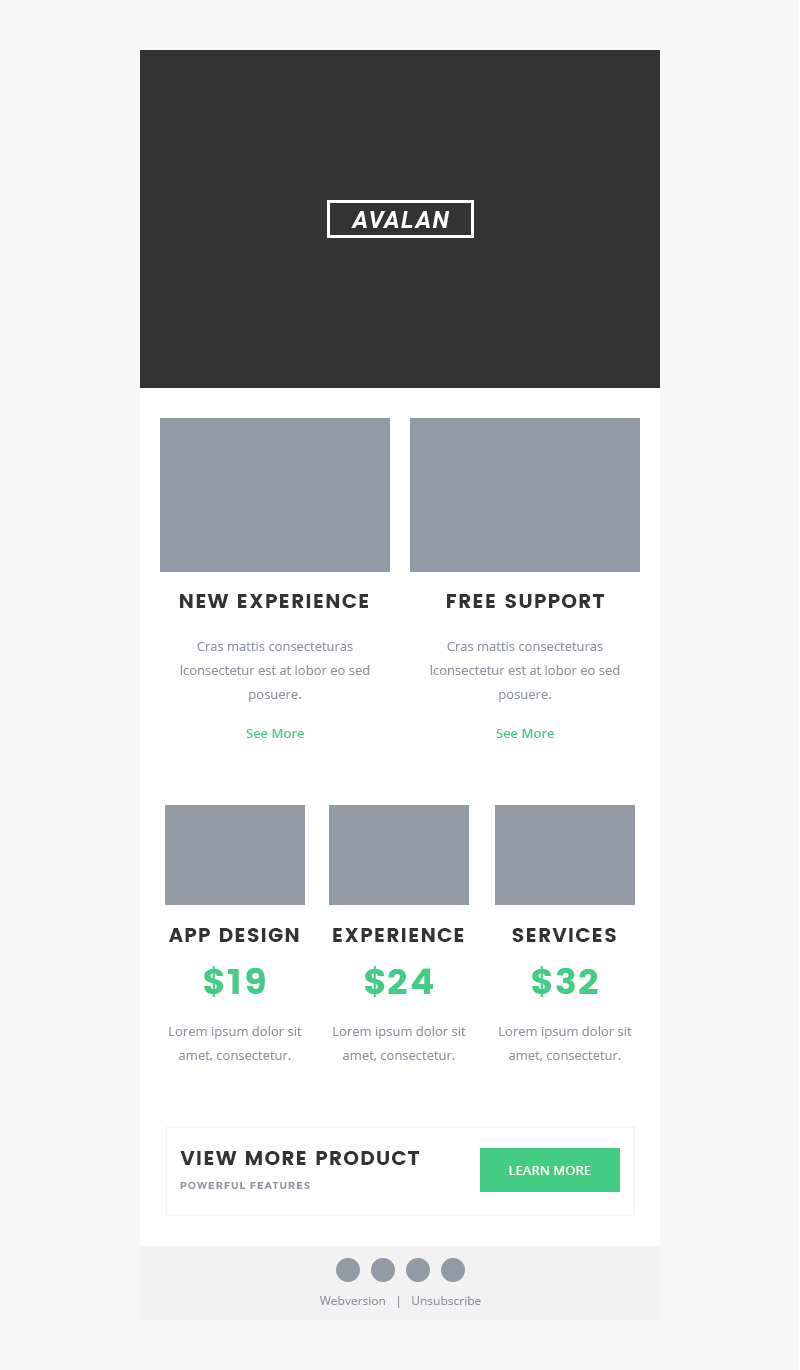
<style>
.page{position:relative;width:800px;height:1370px;background:#f7f7f7}
.page>*{position:absolute;margin:0}
.t1{font:20px "Poppins";letter-spacing:0.05em;color:#333333}
.t2{font:13px/24px "OpenSans";color:#8f96a1}
.t3{font:13px "OpenSans-Semibold";color:#44cc84}
.t4{font:36px "Poppins";letter-spacing:0.05em;color:#44cc84}
.t5{font:13px "OpenSans-Semibold";color:#ffffff}
.t6{font:10px "Montserrat-Bold";letter-spacing:0.1em;color:#8f96a1}
.t7{font:12px "OpenSans";color:#8f96a1}
</style>
<div class="page">
<p class="t1" style="left:180px;top:594px;width:188px;height:14px">NEW EXPERIENCE</p>
<p class="t1" style="left:447px;top:594px;width:158px;height:14px">FREE SUPPORT</p>
<p class="t2" style="left:180px;top:642px;width:190px;height:60px;text-align:center">Cras mattis consecteturas lconsectetur est at lobor eo sed posuere.</p>
<p class="t2" style="left:430px;top:642px;width:190px;height:60px;text-align:center">Cras mattis consecteturas lconsectetur est at lobor eo sed posuere.</p>
<p class="t3" style="left:246px;top:729px;width:58px;height:9px">See More</p>
<p class="t3" style="left:496px;top:729px;width:58px;height:9px">See More</p>
<p class="t1" style="left:168px;top:928px;width:131px;height:14px">APP DESIGN</p>
<p class="t1" style="left:333px;top:928px;width:131px;height:14px">EXPERIENCE</p>
<p class="t1" style="left:512px;top:928px;width:104px;height:14px">SERVICES</p>
<p class="t4" style="left:204px;top:966px;width:61px;height:31px">$19</p>
<p class="t4" style="left:365px;top:966px;width:68px;height:31px">$24</p>
<p class="t4" style="left:532px;top:966px;width:66px;height:31px">$32</p>
<p class="t2" style="left:169px;top:1026px;width:133px;height:35px;text-align:center">Lorem ipsum dolor sit amet, consectetur.</p>
<p class="t2" style="left:333px;top:1026px;width:133px;height:35px;text-align:center">Lorem ipsum dolor sit amet, consectetur.</p>
<p class="t2" style="left:499px;top:1026px;width:133px;height:35px;text-align:center">Lorem ipsum dolor sit amet, consectetur.</p>
<p class="t1" style="left:180px;top:1151px;width:240px;height:14px">VIEW MORE PRODUCT</p>
<p class="t5" style="left:509px;top:1166px;width:82px;height:9px">LEARN MORE</p>
<p class="t6" style="left:180px;top:1181px;width:130px;height:9px">POWERFUL FEATURES</p>
<p class="t7" style="left:319px;top:1296px;width:162px;height:12px">Webversion   |   Unsubscribe</p>
</div>
